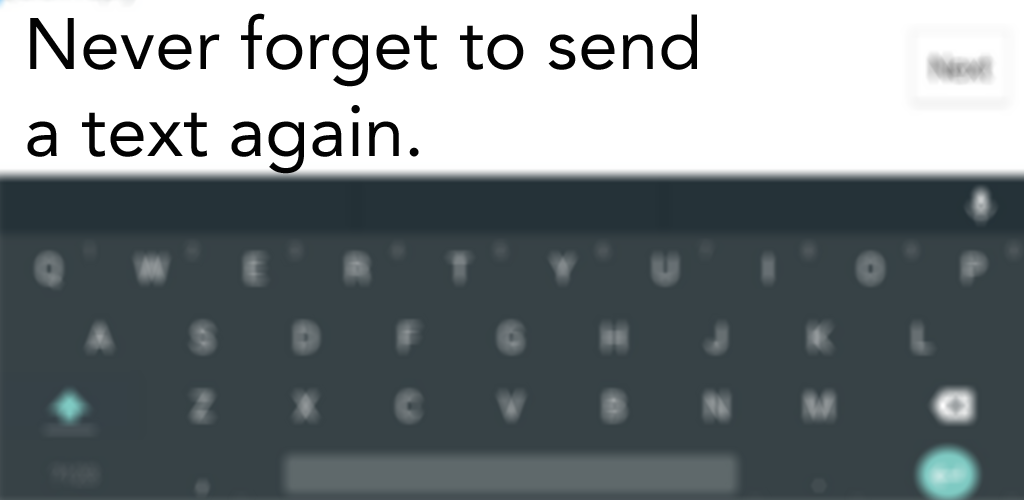
<style>
.page{position:relative;width:1024px;height:500px;background:#374246}
.page>*{position:absolute;margin:0}
.t1{font:72px "Avenir-Roman";color:#020202}
</style>
<div class="page">
<p class="t1" style="left:27px;top:13px;width:670px;height:161px">Never forget to send <br>a text again.</p>
</div>
